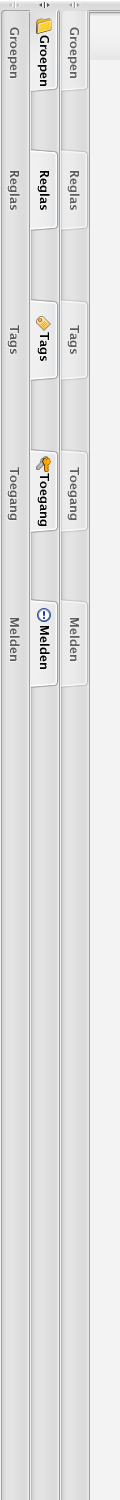
<style>
.page{position:relative;width:120px;height:1500px;background:#f3f3f3}
.page>*{position:absolute;margin:0}
.t1{font:12px "LucidaGrande-Bold";color:#5a5a5a}
.t2{font:12px "LucidaGrande-Bold";color:#5e5e5e}
.t3{font:12px "LucidaGrande-Bold";color:#000000}
</style>
<div class="page">
<p class="t1" style="left:7px;top:27px;width:12px;height:51px;rotate:90deg">Groepen</p>
<p class="t2" style="left:67px;top:27px;width:12px;height:51px;rotate:90deg">Groepen</p>
<p class="t3" style="left:37px;top:35px;width:12px;height:51px;rotate:90deg">Groepen</p>
<p class="t1" style="left:7px;top:171px;width:13px;height:39px;rotate:90deg">Reglas</p>
<p class="t3" style="left:37px;top:171px;width:13px;height:39px;rotate:90deg">Reglas</p>
<p class="t2" style="left:67px;top:171px;width:13px;height:39px;rotate:90deg">Reglas</p>
<p class="t1" style="left:7px;top:325px;width:12px;height:29px;rotate:90deg">Tags</p>
<p class="t2" style="left:67px;top:325px;width:12px;height:29px;rotate:90deg">Tags</p>
<p class="t3" style="left:37px;top:332px;width:12px;height:29px;rotate:90deg">Tags</p>
<p class="t1" style="left:7px;top:467px;width:12px;height:53px;rotate:90deg">Toegang</p>
<p class="t3" style="left:37px;top:473px;width:12px;height:53px;rotate:90deg">Toegang</p>
<p class="t2" style="left:67px;top:467px;width:12px;height:53px;rotate:90deg">Toegang</p>
<p class="t1" style="left:10px;top:618px;width:10px;height:43px;rotate:90deg">Melden</p>
<p class="t3" style="left:40px;top:626px;width:10px;height:43px;rotate:90deg">Melden</p>
<p class="t2" style="left:70px;top:618px;width:10px;height:43px;rotate:90deg">Melden</p>
</div>
